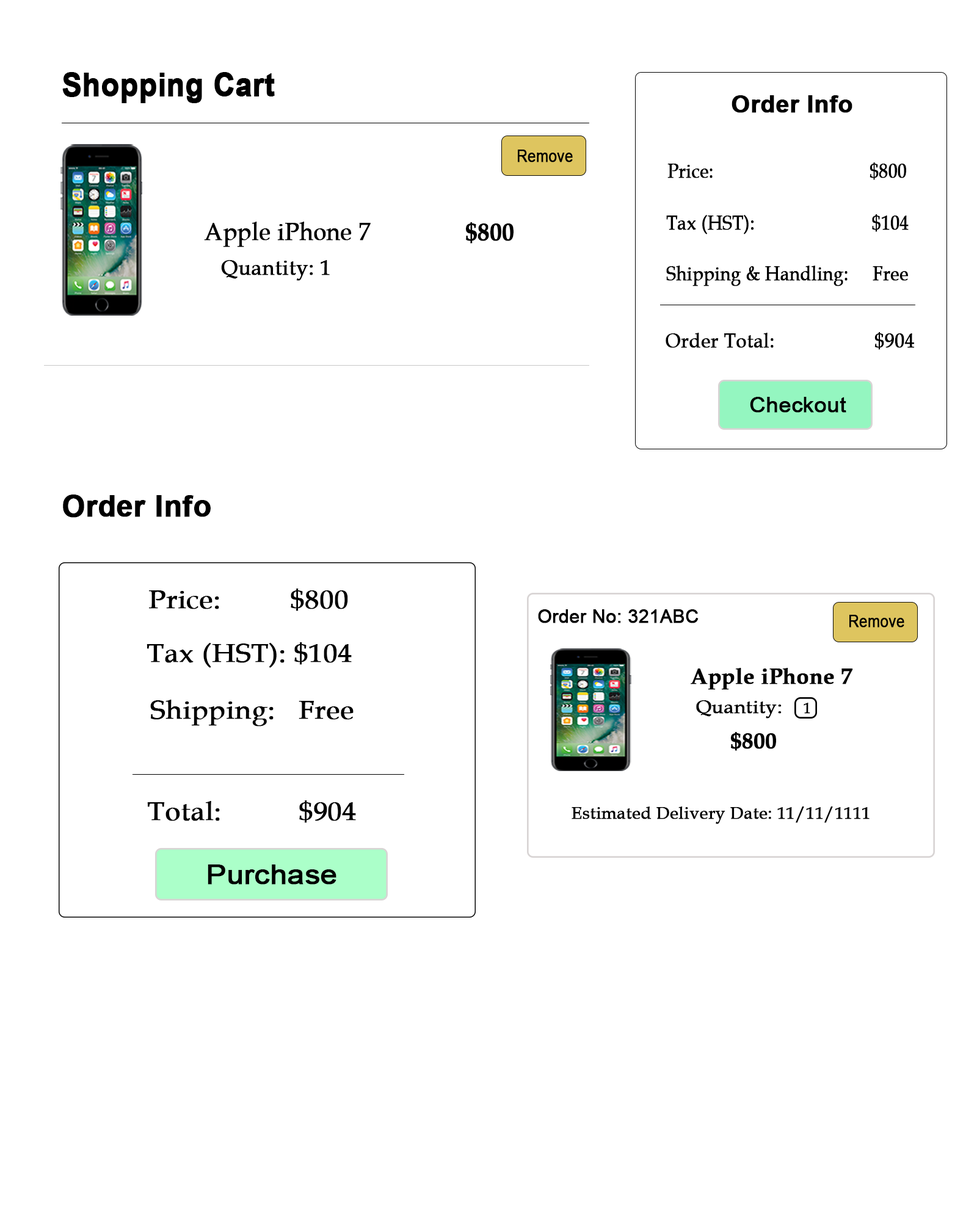
<style>
.page{position:relative;width:977px;height:1221px;background:#ffffff}
.page>*{position:absolute;margin:0}
.t1{font:32.2px "Arial-BoldMT";color:#000000;font-weight:bold;scale:0.92 1}
.t2{font:23.6px "Arial-BoldMT";color:#000000;font-weight:bold}
.t3{font:16.6px "ArialMT";color:#000000;font-weight:bold;scale:0.88 1}
.t4{font:20px "BookAntiqua";color:#000000;font-weight:bold;scale:0.88 1}
.t5{font:25.2px "BookAntiqua";color:#000000;font-weight:bold;scale:0.92 1}
.t6{font:25.2px "BookAntiqua-Bold";color:#000000;font-weight:bold;scale:0.92 1}
.t7{font:21.4px "BookAntiqua";color:#000000;font-weight:bold}
.t8{font:20px "BookAntiqua";color:#000000;font-weight:bold;scale:0.95 1}
.t9{font:21.1px "ArialMT";color:#000000;font-weight:bold;scale:1.03 1}
.t10{font:29.3px "Arial-BoldMT";color:#000000;font-weight:bold}
.t11{font:25.7px "BookAntiqua";color:#000000;font-weight:bold;scale:1.08 1}
.t12{font:18.3px "ArialMT";color:#000000;font-weight:bold}
.t13{font:22px "BookAntiqua-Bold";color:#000000;font-weight:bold}
.t14{font:18.3px "BookAntiqua";color:#000000;font-weight:bold;scale:1.06 1}
.t15{font:14.7px "BookAntiqua";color:#000000;font-weight:bold}
.t16{font:17.1px "BookAntiqua";color:#000000;font-weight:bold}
.t17{font:27.5px "ArialMT";color:#000000;font-weight:bold;scale:1.08 1}
</style>
<div class="page">
<p class="t1" style="left:62px;top:72px;width:213px;height:31px">Shopping Cart</p>
<p class="t2" style="left:731px;top:95px;width:121px;height:18px">Order Info</p>
<p class="t3" style="left:518px;top:150px;width:55px;height:12px">Remove</p>
<p class="t4" style="left:667px;top:162px;width:239px;height:18px">Price:                                $800</p>
<p class="t5" style="left:204px;top:222px;width:167px;height:25px">Apple iPhone 7</p>
<p class="t4" style="left:666px;top:214px;width:242px;height:20px">Tax (HST):                        $104</p>
<p class="t6" style="left:466px;top:222px;width:47px;height:22px">$800</p>
<p class="t7" style="left:221px;top:260px;width:109px;height:21px">Quantity: 1</p>
<p class="t4" style="left:666px;top:266px;width:242px;height:20px">Shipping &amp; Handling:     Free</p>
<p class="t8" style="left:665px;top:332px;width:249px;height:18px">Order Total:                   $904</p>
<p class="t9" style="left:750px;top:397px;width:96px;height:16px">Checkout</p>
<p class="t10" style="left:63px;top:494px;width:148px;height:24px">Order Info</p>
<p class="t11" style="left:149px;top:588px;width:199px;height:23px">Price:         $800</p>
<p class="t12" style="left:538px;top:609px;width:160px;height:14px">Order No: 321ABC</p>
<p class="t3" style="left:849px;top:615px;width:55px;height:13px">Remove</p>
<p class="t11" style="left:147px;top:642px;width:205px;height:26px">Tax (HST): $104</p>
<p class="t13" style="left:690px;top:668px;width:163px;height:22px">Apple iPhone 7</p>
<p class="t11" style="left:150px;top:700px;width:203px;height:26px">Shipping:   Free</p>
<p class="t14" style="left:696px;top:700px;width:85px;height:18px">Quantity:</p>
<p class="t15" style="left:803px;top:703px;width:7px;height:11px">1</p>
<p class="t13" style="left:730px;top:732px;width:46px;height:19px">$800</p>
<p class="t11" style="left:147px;top:800px;width:209px;height:23px">Total:          $904</p>
<p class="t16" style="left:571px;top:806px;width:298px;height:18px">Estimated Delivery Date: 11/11/1111</p>
<p class="t17" style="left:208px;top:864px;width:128px;height:21px">Purchase</p>
</div>
